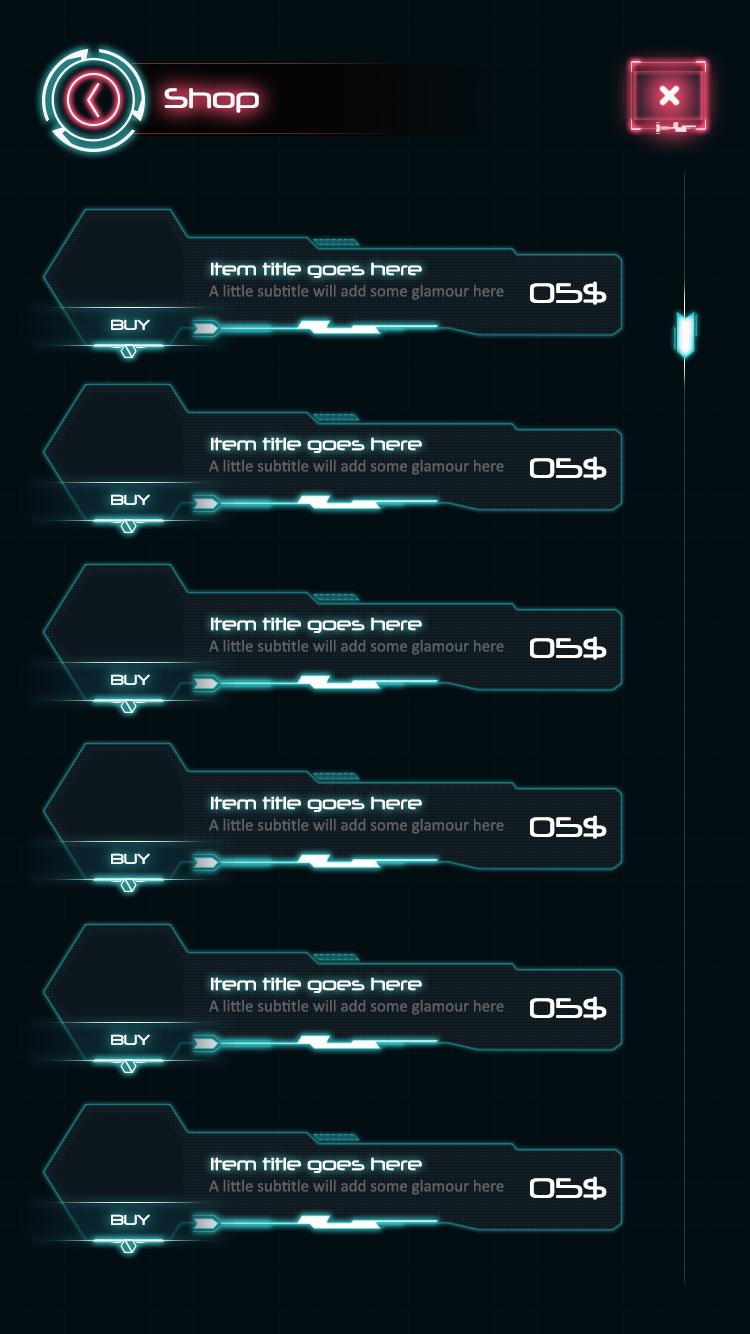
<style>
.page{position:relative;width:750px;height:1334px;background:#030e13}
.page>*{position:absolute;margin:0}
.t1{font:27.2px "Neuropol-Regular";color:#f4fafc}
.t2{font:17px "Neuropol-Regular";color:#ffffff}
.t3{font:27.2px "Neuropol-Regular";color:#ffffff}
.t4{font:17px "Calibri";color:#5d6164}
.t5{font:13.6px "Neuropol-Regular";color:#ffffff}
</style>
<div class="page">
<p class="t1" style="left:164px;top:88px;width:95px;height:25px">Shop</p>
<p class="t2" style="left:211px;top:262px;width:211px;height:16px">Item title goes here</p>
<p class="t3" style="left:530px;top:281px;width:77px;height:24px">05$</p>
<p class="t4" style="left:209px;top:284px;width:295px;height:16px">A little subtitle will add some glamour here</p>
<p class="t5" style="left:111px;top:319px;width:39px;height:11px">BUY</p>
<p class="t2" style="left:211px;top:437px;width:211px;height:16px">Item title goes here</p>
<p class="t4" style="left:209px;top:459px;width:295px;height:16px">A little subtitle will add some glamour here</p>
<p class="t3" style="left:530px;top:456px;width:77px;height:24px">05$</p>
<p class="t5" style="left:111px;top:494px;width:39px;height:11px">BUY</p>
<p class="t2" style="left:211px;top:617px;width:211px;height:16px">Item title goes here</p>
<p class="t4" style="left:209px;top:639px;width:295px;height:16px">A little subtitle will add some glamour here</p>
<p class="t3" style="left:530px;top:636px;width:77px;height:24px">05$</p>
<p class="t5" style="left:111px;top:674px;width:39px;height:11px">BUY</p>
<p class="t2" style="left:211px;top:796px;width:211px;height:16px">Item title goes here</p>
<p class="t4" style="left:209px;top:818px;width:295px;height:16px">A little subtitle will add some glamour here</p>
<p class="t3" style="left:530px;top:815px;width:77px;height:24px">05$</p>
<p class="t5" style="left:111px;top:853px;width:39px;height:11px">BUY</p>
<p class="t2" style="left:211px;top:977px;width:211px;height:16px">Item title goes here</p>
<p class="t4" style="left:209px;top:999px;width:295px;height:16px">A little subtitle will add some glamour here</p>
<p class="t3" style="left:530px;top:996px;width:77px;height:24px">05$</p>
<p class="t5" style="left:111px;top:1034px;width:39px;height:11px">BUY</p>
<p class="t2" style="left:211px;top:1157px;width:211px;height:16px">Item title goes here</p>
<p class="t4" style="left:209px;top:1179px;width:295px;height:16px">A little subtitle will add some glamour here</p>
<p class="t3" style="left:530px;top:1176px;width:77px;height:24px">05$</p>
<p class="t5" style="left:111px;top:1214px;width:39px;height:11px">BUY</p>
</div>
